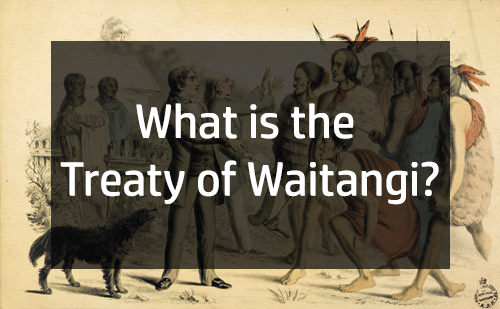
<style>
.page{position:relative;width:500px;height:309px}
.page>*{position:absolute;margin:0}
.t1{font:48px "HPSimplified-Regular";color:#ffffff}
</style>
<div class="page">
<p class="t1" style="left:60px;top:103px;width:379px;height:102px;text-align:center">What is the <br>Treaty of Waitangi?</p>
</div>
